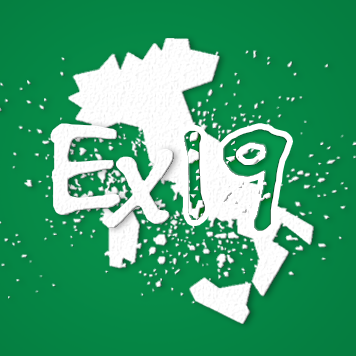
<style>
.page{position:relative;width:356px;height:356px}
.page>*{position:absolute;margin:0}
.t1{font:150px "BuxtonSketch";color:#ffffff;scale:1.24 1}
.t2{font:144px "BuxtonSketch";letter-spacing:0.05em}
</style>
<div class="page">
<p class="t1" style="left:50px;top:123px;width:71px;height:92px">E</p>
<p class="t2" style="left:184px;top:129px;width:103px;height:102px">19</p>
<p class="t1" style="left:106px;top:149px;width:68px;height:79px">x</p>
</div>
